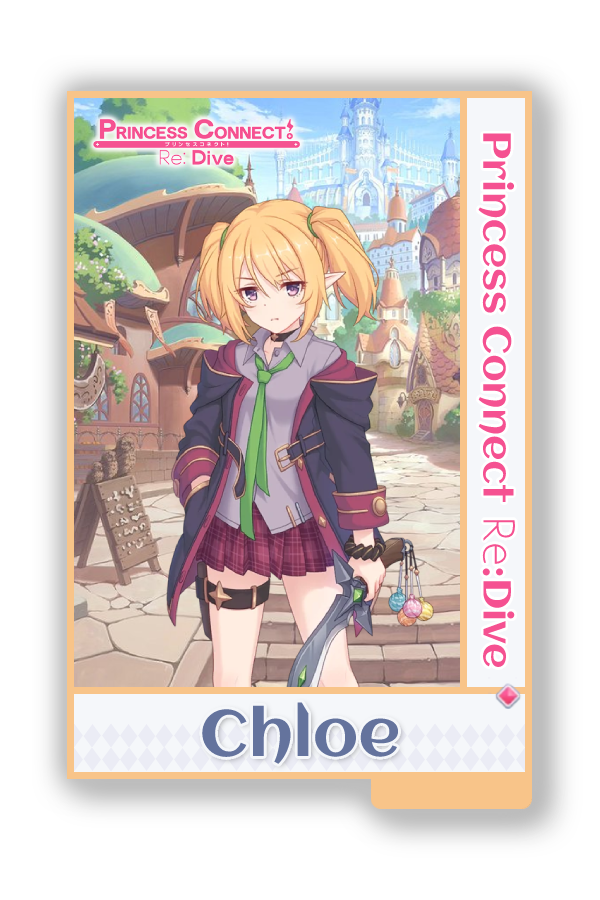
<style>
.page{position:relative;width:600px;height:900px;background:#ffffff}
.page>*{position:absolute;margin:0}
.t1{font:39px "Aclonica-Regular";color:#f55191}
.t2{font:39px "AaarghNormal";color:#f55191}
.t3{font:65px "Aclonica-Regular";color:#64739d}
</style>
<div class="page">
<p class="t1" style="left:478px;top:133px;width:38px;height:534px;rotate:90deg">Princess Connect <span class="t2">Re</span>:Dive</p>
<p class="t3" style="left:202px;top:702px;width:197px;height:62px">Chloe</p>
</div>
